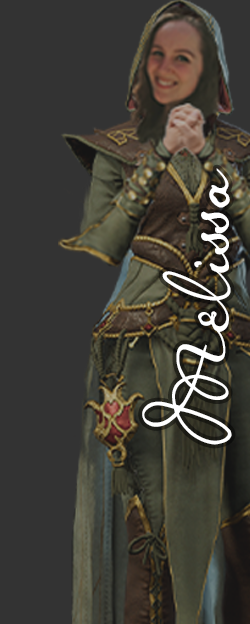
<style>
.page{position:relative;width:250px;height:624px;background:#333333}
.page>*{position:absolute;margin:0}
.t1{font:72px "MitreSquare";color:#ffffff}
</style>
<div class="page">
<p class="t1" style="left:142px;top:168px;width:90px;height:277px;rotate:-90deg">Melissa</p>
</div>
